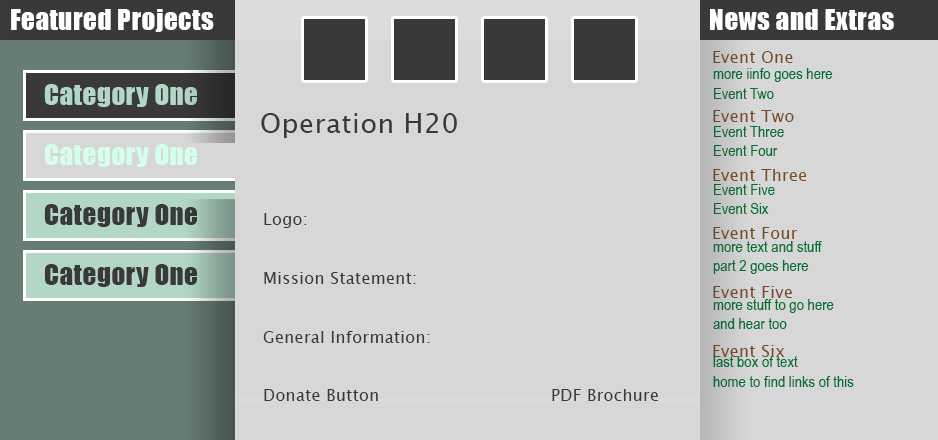
<style>
.page{position:relative;width:938px;height:440px;background:#d7d7d7}
.page>*{position:absolute;margin:0}
.t1{font:26.7px "Impact";letter-spacing:0.025em;color:#fefefe}
.t2{font:12px/58.7px "LucidaSansUnicode";letter-spacing:0.025em;color:#754c24}
.t3{font:12px "ArialNarrow";color:#007236}
.t4{font:26.7px "Impact";letter-spacing:0.025em;color:#b3d7c7}
.t5{font:26.7px "LucidaSansUnicode";letter-spacing:0.025em;color:#393939}
.t6{font:26.7px "Impact";letter-spacing:0.025em;color:#d4ffec}
.t7{font:26.7px "Impact";letter-spacing:0.025em;color:#393939}
.t8{font:16px/58.7px "LucidaSansUnicode";letter-spacing:0.025em;color:#393939}
</style>
<div class="page">
<p class="t1" style="left:11px;top:9px;width:203px;height:23px">Featured Projects</p>
<p class="t1" style="left:710px;top:9px;width:184px;height:21px">News and Extras</p>
<p class="t2" style="left:713px;top:51px;width:94px;height:306px">Event One<br>Event Two<br>Event Three<br>Event Four<br>Event Five<br>Event Six</p>
<p class="t3" style="left:713px;top:68px;width:141px;height:319px">more iinfo goes here<br>Event Two<br><br>Event Three<br>Event Four<br><br>Event Five<br>Event Six<br><br>more text and stuff<br>part 2 goes here<br><br>more stuff to go here<br>and hear too<br><br>last box of text<br>home to find links of this</p>
<p class="t4" style="left:44px;top:84px;width:153px;height:23px">Category One</p>
<p class="t5" style="left:261px;top:113px;width:196px;height:25px">Operation H20</p>
<p class="t6" style="left:44px;top:144px;width:153px;height:23px">Category One</p>
<p class="t7" style="left:44px;top:204px;width:153px;height:23px">Category One</p>
<p class="t8" style="left:263px;top:213px;width:395px;height:188px">Logo:<br>Mission Statement:<br>General Information:<br>Donate Button     PDF Brochure</p>
<p class="t7" style="left:44px;top:264px;width:153px;height:23px">Category One</p>
</div>
